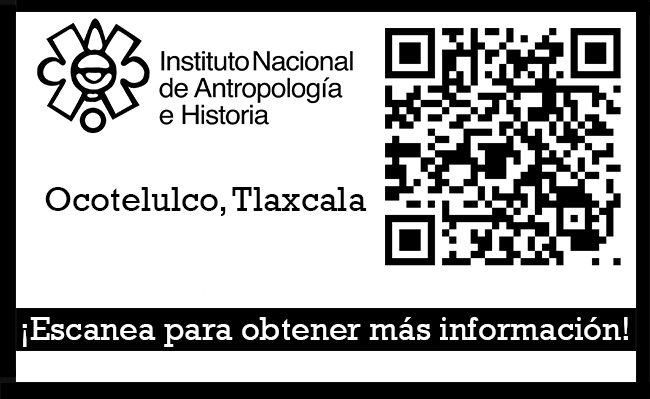
<style>
.page{position:relative;width:650px;height:399px;background:#ffffff}
.page>*{position:absolute;margin:0}
.t1{font:35px "Rockwell";color:#000000}
.t2{font:33px "Rockwell";color:#ffffff}
</style>
<div class="page">
<p class="t1" style="left:45px;top:187px;width:322px;height:29px">Ocotelulco, Tlaxcala</p>
<p class="t2" style="left:22px;top:317px;width:606px;height:30px">¡Escanea para obtener más información!</p>
</div>
